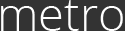
<style>
.page{position:relative;width:125px;height:31px;background:#333333}
.page>*{position:absolute;margin:0}
.t1{font:47px "OpenSans-Light";color:#ffffff}
</style>
<div class="page">
<p class="t1" style="left:1px;top:0px;width:122px;height:31px">metro</p>
</div>
